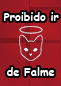
<style>
.page{position:relative;width:61px;height:86px}
.page>*{position:absolute;margin:0}
.t1{font:11px "ComicSansMS-Bold";color:#ffffff}
</style>
<div class="page">
<p class="t1" style="left:4px;top:12px;width:55px;height:9px">Proibido ir</p>
<p class="t1" style="left:6px;top:67px;width:49px;height:9px">de Falme</p>
</div>
